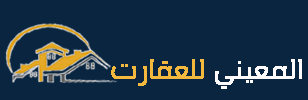
<style>
.page{position:relative;width:308px;height:100px;background:#0a2540}
.page>*{position:absolute;margin:0}
.t1{font:30px "Sheba";color:#fefcfc;font-weight:bold}
.t2{font:30px "Sheba";color:#f2b93e;font-weight:bold}
</style>
<div class="page">
<p class="t1" style="left:111px;top:59px;width:191px;height:30px">المعيني <span class="t2">للعقارت</span></p>
</div>
